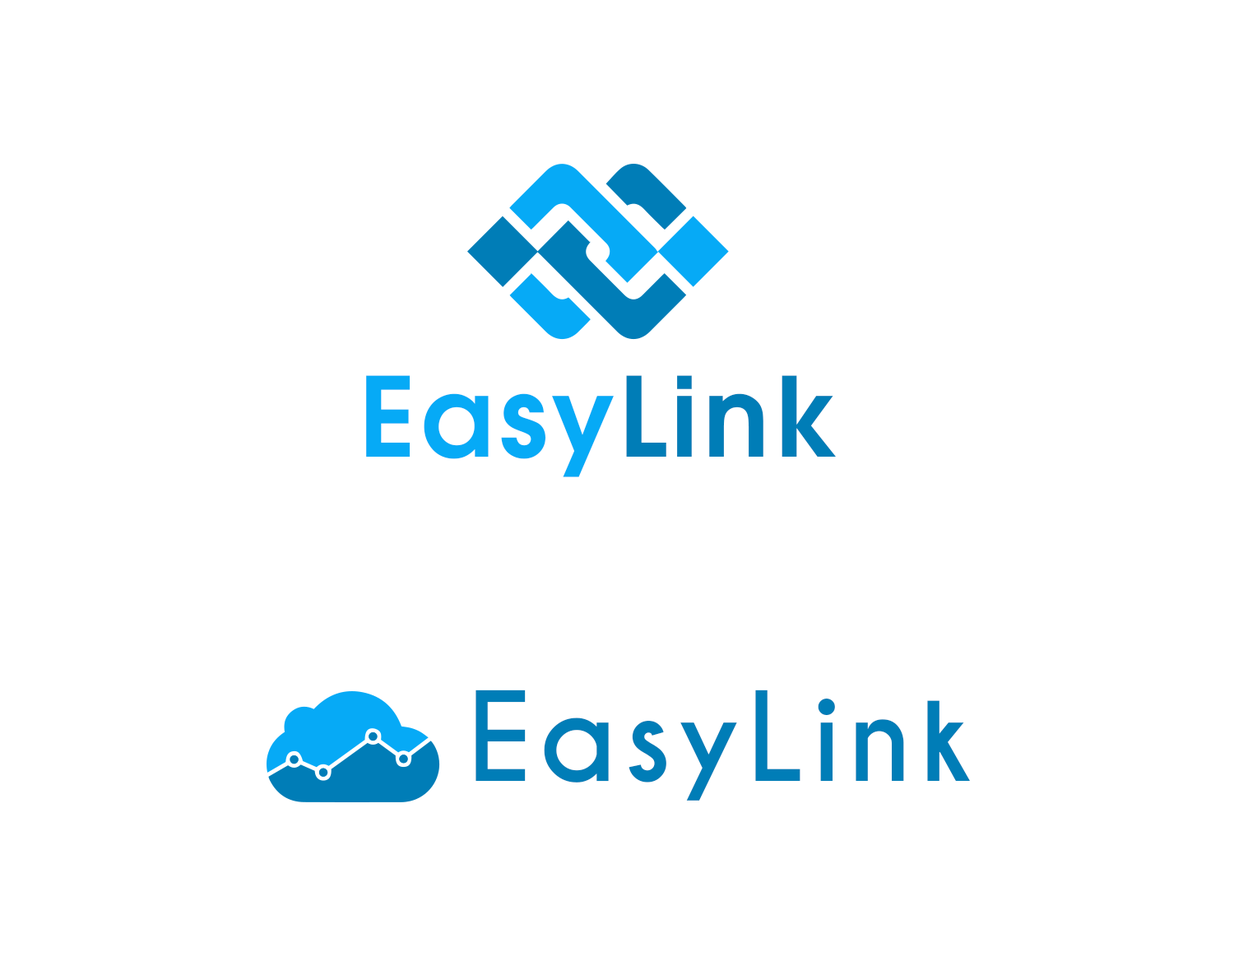
<style>
.page{position:relative;width:1234px;height:966px;background:#ffffff}
.page>*{position:absolute;margin:0}
.t1{font:109.1px "AvantGardeCE-Demi";letter-spacing:0.025em;color:#06aaf6}
.t2{font:109.1px "AvantGardeCE-Demi";letter-spacing:0.025em;color:#007db7}
.t3{font:116.1px "CaviarDreams-Bold";letter-spacing:0.025em;color:#007db7}
</style>
<div class="page">
<p class="t1" style="left:366px;top:375px;width:470px;height:102px">Easy<span class="t2">Link</span></p>
<p class="t3" style="left:476px;top:690px;width:494px;height:111px">EasyLink</p>
</div>
